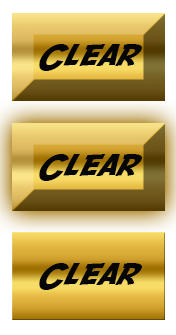
<style>
.page{position:relative;width:176px;height:335px}
.page>*{position:absolute;margin:0}
.t1{font:30px "SFFedora";letter-spacing:-0.005em;color:#060606;scale:1.2 1}
</style>
<div class="page">
<p class="t1" style="left:39px;top:44px;width:103px;height:27px">Clear</p>
<p class="t1" style="left:39px;top:154px;width:103px;height:27px">Clear</p>
<p class="t1" style="left:39px;top:263px;width:103px;height:27px">Clear</p>
</div>
